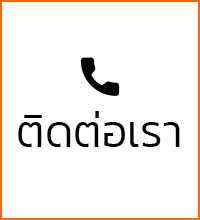
<style>
.page{position:relative;width:200px;height:220px;background:#ffffff}
.page>*{position:absolute;margin:0}
.t1{font:44.6px "Kanit-Light";color:#000000}
</style>
<div class="page">
<p class="t1" style="left:18px;top:111px;width:162px;height:36px">ติดต่อเรา</p>
</div>
